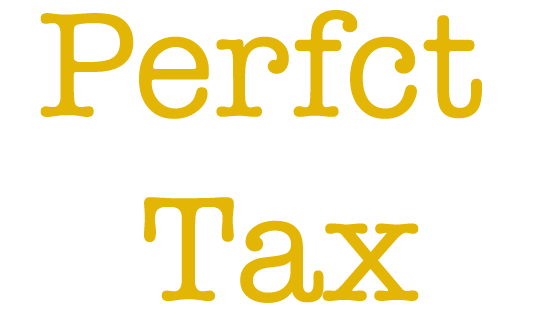
<style>
.page{position:relative;width:560px;height:315px;background:#ffffff}
.page>*{position:absolute;margin:0}
.t1{font:153.4px "AmericanTypewriter";color:#e3b505}
</style>
<div class="page">
<p class="t1" style="left:40px;top:10px;width:442px;height:293px;text-align:center">Perfct <br>Tax</p>
</div>
